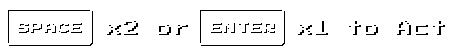
<style>
.page{position:relative;width:451px;height:55px;background:#ffffff}
.page>*{position:absolute;margin:0}
.t1{font:12px "PressStart2P-Regular";letter-spacing:0.1em;color:#ffffff}
.t2{font:12px "PressStart2P-Regular";letter-spacing:0.1em}
.t3{font:16px "PressStart2P-Regular";letter-spacing:0.04em}
</style>
<div class="page">
<p class="t1" style="left:17px;top:22px;width:64px;height:10px">SPACE</p>
<p class="t2" style="left:18px;top:23px;width:64px;height:10px">SPACE</p>
<p class="t3" style="left:107px;top:21px;width:81px;height:14px">x2 or</p>
<p class="t1" style="left:210px;top:22px;width:64px;height:10px">ENTER</p>
<p class="t2" style="left:211px;top:23px;width:64px;height:10px">ENTER</p>
<p class="t3" style="left:298px;top:21px;width:147px;height:14px">x1 to Act</p>
</div>
